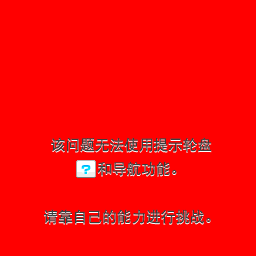
<style>
.page{position:relative;width:256px;height:256px;background:#ff0000}
.page>*{position:absolute;margin:0}
.t1{font:14.7px/24px "DFPHeiW5-GB";color:#3c3c3c}
</style>
<div class="page">
<p class="t1" style="left:44px;top:137px;width:168px;height:87px;text-align:center">该问题无法使用提示轮盘<br>    和导航功能。<br><br>请靠自己的能力进行挑战。</p>
</div>
